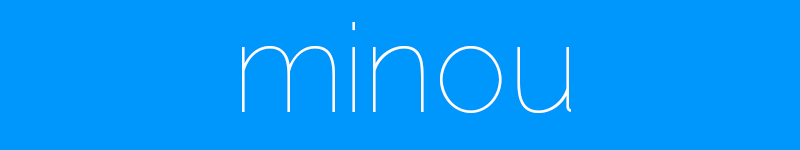
<style>
.page{position:relative;width:800px;height:150px;background:#0097fd}
.page>*{position:absolute;margin:0}
.t1{font:125px "Raleway-Thin";color:#ffffff}
</style>
<div class="page">
<p class="t1" style="left:242px;top:22px;width:329px;height:91px">minou</p>
</div>
